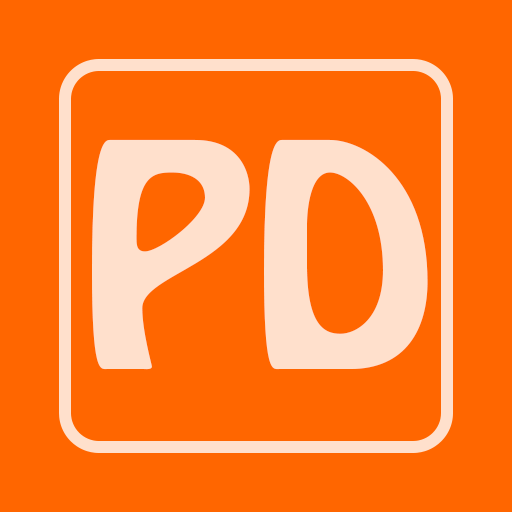
<style>
.page{position:relative;width:512px;height:512px;background:#ff6600}
.page>*{position:absolute;margin:0}
.t1{font:275px "HoboStd";color:#ffe0cc}
</style>
<div class="page">
<p class="t1" style="left:92px;top:139px;width:336px;height:231px">PD</p>
</div>
